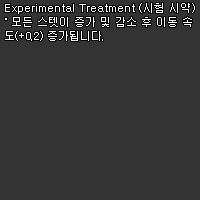
<style>
.page{position:relative;width:200px;height:200px;background:#333333}
.page>*{position:absolute;margin:0}
.t1{font:11px/14px "Dotum";color:#ffffff}
</style>
<div class="page">
<p class="t1" style="left:5px;top:3px;width:190px;height:38px">Experimental Treatment (시험 시약)<br>˚ 모든 스텟이 증가 및 감소 후 이동 속<br>도(+0.2) 증가됩니다.</p>
</div>
